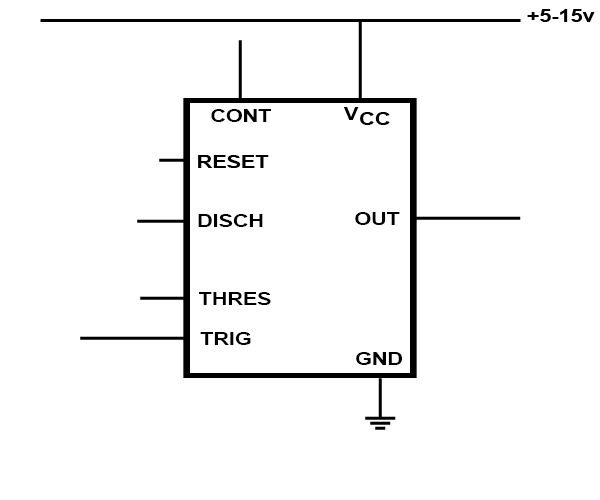
<style>
.page{position:relative;width:600px;height:500px;background:#ffffff}
.page>*{position:absolute;margin:0}
.t1{font:17.9px "Arial-BoldMT";color:#000000;scale:1.2 1}
</style>
<div class="page">
<p class="t1" style="left:527px;top:9px;width:68px;height:13px">+5-15v</p>
<p class="t1" style="left:211px;top:109px;width:60px;height:13px">CONT</p>
<p class="t1" style="left:198px;top:214px;width:65px;height:13px">DISCH</p>
<p class="t1" style="left:355px;top:212px;width:45px;height:13px">OUT</p>
<p class="t1" style="left:199px;top:292px;width:72px;height:13px">THRES</p>
<p class="t1" style="left:200px;top:332px;width:51px;height:13px">TRIG</p>
<p class="t1" style="left:356px;top:352px;width:46px;height:13px">GND</p>
</div>
